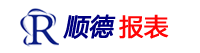
<style>
.page{position:relative;width:200px;height:53px;background:#ffffff}
.page>*{position:absolute;margin:0}
.t1{font:24px "MicrosoftYaHei";color:#000080;font-weight:bold;font-style:italic}
.t2{font:24px "MicrosoftYaHei";color:#ff0404;font-weight:bold}
</style>
<div class="page">
<p class="t1" style="left:63px;top:14px;width:53px;height:25px">顺德</p>
<p class="t2" style="left:119px;top:14px;width:50px;height:25px">报表</p>
</div>
